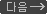
<style>
.page{position:relative;width:47px;height:14px;background:#404040}
.page>*{position:absolute;margin:0}
.t1{font:11px "Dotum";color:#bababa}
.t2{font:16px "Dotum";color:#bababa;font-weight:bold}
</style>
<div class="page">
<p class="t1" style="left:7px;top:2px;width:20px;height:10px">다음</p>
<p class="t2" style="left:30px;top:3px;width:15px;height:7px">→</p>
</div>
